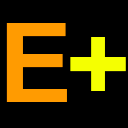
<style>
.page{position:relative;width:128px;height:128px;background:#000000}
.page>*{position:absolute;margin:0}
.t1{font:109.6px "Arial-BoldMT";letter-spacing:-0.06em;color:#ff9c01}
.t2{font:109.6px "Arial-BoldMT";letter-spacing:-0.06em;color:#f6ff01}
</style>
<div class="page">
<p class="t1" style="left:6px;top:23px;width:120px;height:79px">E<span class="t2">+</span></p>
</div>
